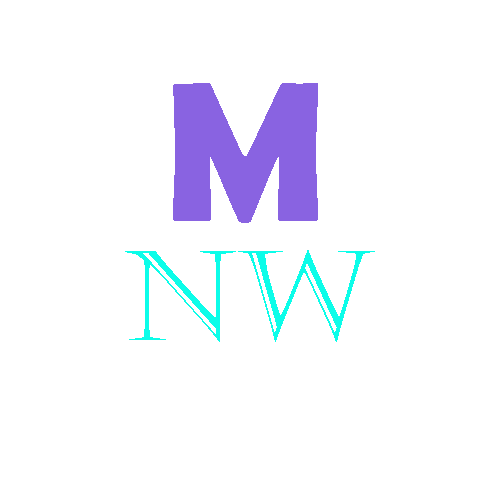
<style>
.page{position:relative;width:500px;height:500px;background:#ffffff}
.page>*{position:absolute;margin:0}
.t1{font:200px "BerlinSansFBDemi-Bold";color:#8963e1}
.t2{font:125px "Castellar";color:#0cfde9}
</style>
<div class="page">
<p class="t1" style="left:173px;top:83px;width:145px;height:140px">M</p>
<p class="t2" style="left:125px;top:250px;width:250px;height:92px">NW</p>
</div>
